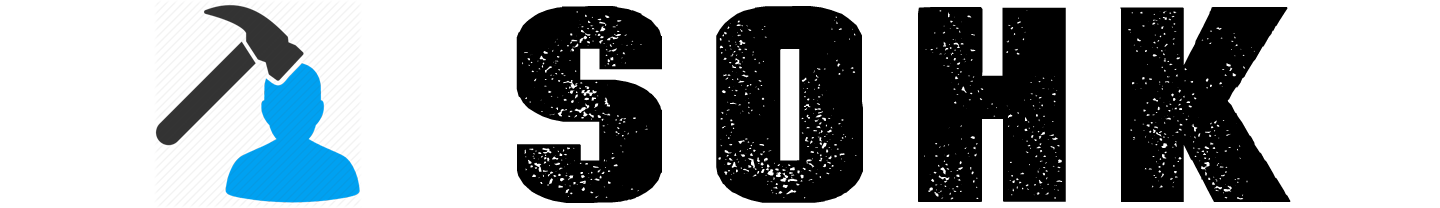
<style>
.page{position:relative;width:1440px;height:208px;background:#ffffff}
.page>*{position:absolute;margin:0}
.t1{font:260px "Headlined";letter-spacing:0.1em;color:#000000;font-variant:small-caps;scale:1.5 1}
</style>
<div class="page">
<p class="t1" style="left:516px;top:6px;width:775px;height:197px">SOHK</p>
</div>
